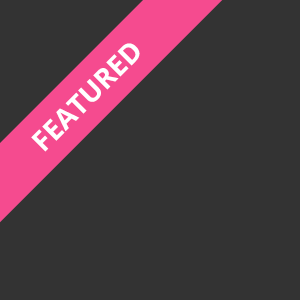
<style>
.page{position:relative;width:300px;height:300px;background:#333333}
.page>*{position:absolute;margin:0}
.t1{font:28px "OpenSans-Bold";color:#ffffff}
</style>
<div class="page">
<p class="t1" style="left:31px;top:43px;width:109px;height:109px;rotate:-45deg">FEATURED</p>
</div>
